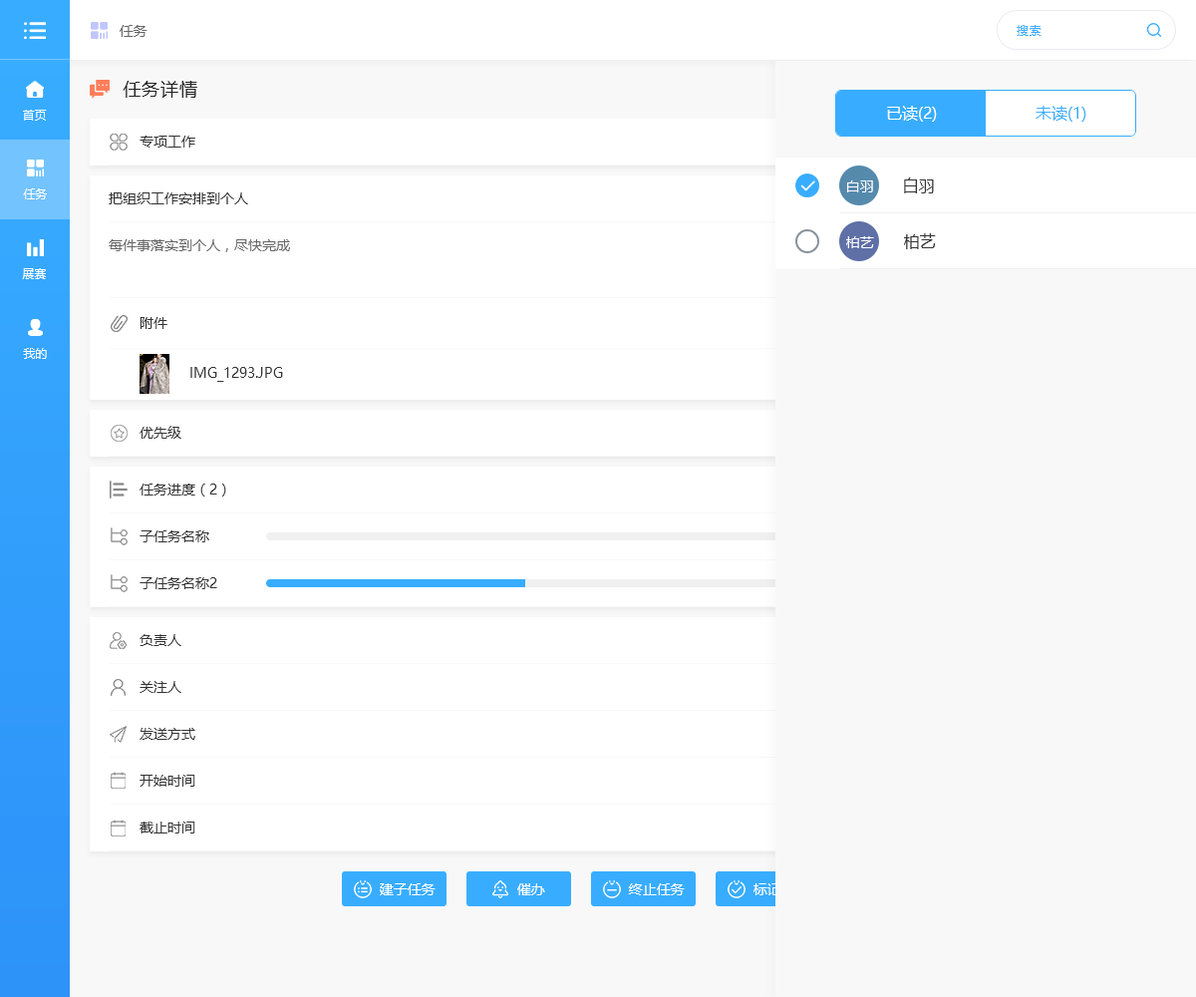
<style>
.page{position:relative;width:1196px;height:997px;background:#ffffff}
.page>*{position:absolute;margin:0}
.t1{font:14px "MicrosoftYaHei";color:#666666}
.t2{font:12px "MicrosoftYaHei";letter-spacing:0.05em;color:#38adff}
.t3{font:17.9px "MicrosoftYaHei";letter-spacing:0.05em;color:#222222}
.t4{font:12px "MicrosoftYaHei";color:#ffffff}
.t5{font:15.9px "MicrosoftYaHei";color:#ffffff}
.t6{font:15.9px "MicrosoftYaHei";color:#38adff}
.t7{font:14px "MicrosoftYaHei";color:#333333}
.t8{font:14px "MicrosoftYaHei";color:#fffefe}
.t9{font:15.9px "MicrosoftYaHei";color:#333333}
.t10{font:14px "MicrosoftYaHei";color:#ffffff}
</style>
<div class="page">
<p class="t1" style="left:120px;top:25px;width:28px;height:12px">任务</p>
<p class="t2" style="left:1017px;top:25px;width:25px;height:11px">搜索</p>
<p class="t3" style="left:123px;top:81px;width:74px;height:17px">任务详情</p>
<p class="t4" style="left:23px;top:110px;width:24px;height:11px">首页</p>
<p class="t5" style="left:887px;top:106px;width:50px;height:16px">已读(2)</p>
<p class="t6" style="left:1036px;top:106px;width:51px;height:16px">未读(1)</p>
<p class="t7" style="left:140px;top:136px;width:55px;height:12px">专项工作</p>
<p class="t8" style="left:847px;top:180px;width:26px;height:12px">白羽</p>
<p class="t9" style="left:904px;top:177px;width:30px;height:16px">白羽</p>
<p class="t4" style="left:23px;top:188px;width:24px;height:11px">任务</p>
<p class="t7" style="left:109px;top:192px;width:139px;height:12px">把组织工作安排到个人</p>
<p class="t9" style="left:904px;top:233px;width:32px;height:16px">柏艺</p>
<p class="t1" style="left:109px;top:239px;width:181px;height:13px">每件事落实到个人，尽快完成</p>
<p class="t8" style="left:846px;top:236px;width:28px;height:12px">柏艺</p>
<p class="t4" style="left:22px;top:268px;width:24px;height:11px">展赛</p>
<p class="t7" style="left:140px;top:317px;width:27px;height:12px">附件</p>
<p class="t4" style="left:23px;top:348px;width:24px;height:11px">我的</p>
<p class="t7" style="left:190px;top:367px;width:93px;height:15px">IMG_1293.JPG</p>
<p class="t7" style="left:140px;top:426px;width:41px;height:13px">优先级</p>
<p class="t7" style="left:140px;top:483px;width:86px;height:13px">任务进度（2）</p>
<p class="t7" style="left:140px;top:530px;width:69px;height:12px">子任务名称</p>
<p class="t7" style="left:140px;top:577px;width:77px;height:12px">子任务名称2</p>
<p class="t7" style="left:140px;top:634px;width:41px;height:12px">负责人</p>
<p class="t7" style="left:140px;top:681px;width:41px;height:12px">关注人</p>
<p class="t7" style="left:140px;top:728px;width:55px;height:12px">发送方式</p>
<p class="t7" style="left:140px;top:775px;width:55px;height:12px">开始时间</p>
<p class="t7" style="left:140px;top:821px;width:55px;height:12px">截止时间</p>
<p class="t10" style="left:380px;top:883px;width:56px;height:12px">建子任务</p>
<p class="t10" style="left:517px;top:883px;width:28px;height:12px">催办</p>
<p class="t10" style="left:628px;top:883px;width:57px;height:12px">终止任务</p>
<p class="t10" style="left:754px;top:883px;width:55px;height:12px">标记完成</p>
</div>
